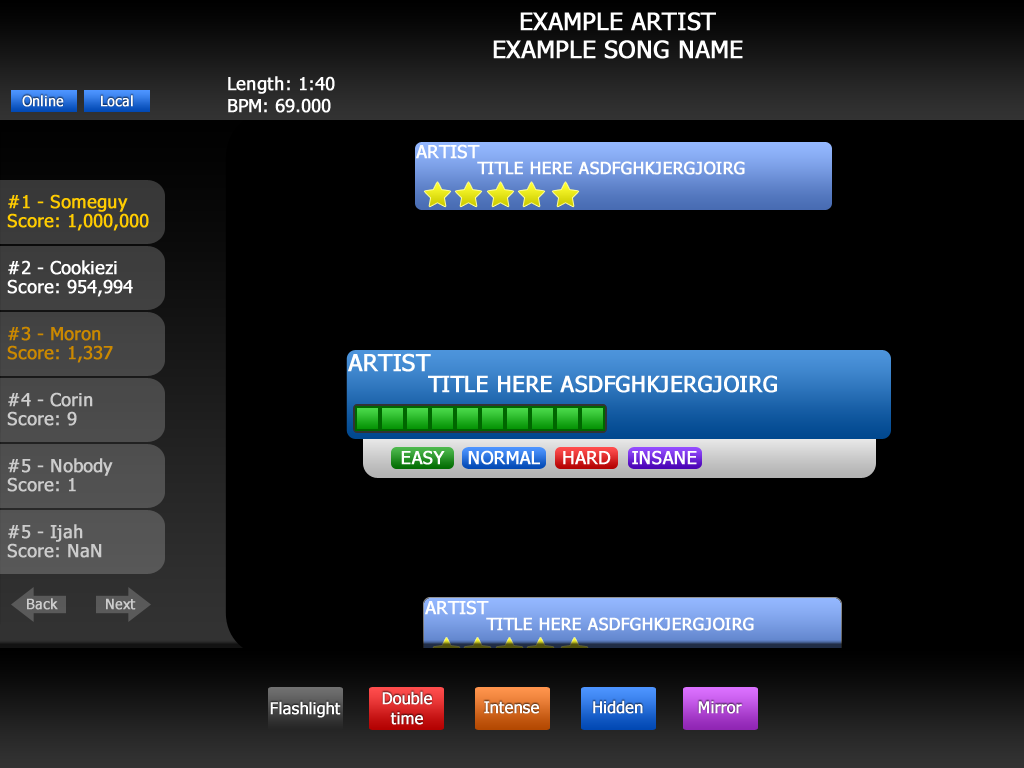
<style>
.page{position:relative;width:1024px;height:768px;background:#000000}
.page>*{position:absolute;margin:0}
.t1{font:24px "Tahoma";color:#ffffff;font-weight:bold}
.t2{font:18px "Tahoma";color:#ffffff;font-weight:bold}
.t3{font:14px "Tahoma";color:#ffffff;font-weight:bold}
.t4{font:17px "Tahoma";color:#ffffff;font-weight:bold}
.t5{font:18px "Tahoma";color:#ffcc00;font-weight:bold}
.t6{font:18px "Tahoma";color:#ca8800;font-weight:bold}
.t7{font:23.6px "Tahoma";color:#ffffff;font-weight:bold}
.t8{font:22.2px "Tahoma";color:#ffffff;font-weight:bold}
.t9{font:18px "Tahoma";color:#cccccc;font-weight:bold}
.t10{font:14px "Tahoma";color:#cccccc;font-weight:bold}
.t11{font:16px "Tahoma";color:#ffffff;font-weight:bold}
.t12{font:16px/19.2px "Tahoma";color:#ffffff;font-weight:bold}
</style>
<div class="page">
<p class="t1" style="left:520px;top:12px;width:196px;height:19px">EXAMPLE ARTIST</p>
<p class="t1" style="left:493px;top:40px;width:250px;height:19px">EXAMPLE SONG NAME</p>
<p class="t2" style="left:228px;top:76px;width:107px;height:18px">Length: 1:40</p>
<p class="t3" style="left:22px;top:95px;width:42px;height:12px">Online</p>
<p class="t3" style="left:101px;top:95px;width:32px;height:12px">Local</p>
<p class="t2" style="left:228px;top:98px;width:103px;height:15px">BPM: 69.000</p>
<p class="t2" style="left:416px;top:144px;width:64px;height:15px">ARTIST</p>
<p class="t4" style="left:477px;top:161px;width:268px;height:14px">TITLE HERE ASDFGHKJERGJOIRG</p>
<p class="t5" style="left:8px;top:194px;width:120px;height:18px">#1 - Someguy</p>
<p class="t5" style="left:7px;top:213px;width:142px;height:18px">Score: 1,000,000</p>
<p class="t2" style="left:8px;top:260px;width:109px;height:15px">#2 - Cookiezi</p>
<p class="t2" style="left:7px;top:279px;width:126px;height:18px">Score: 954,994</p>
<p class="t6" style="left:8px;top:326px;width:93px;height:15px">#3 - Moron</p>
<p class="t6" style="left:7px;top:345px;width:106px;height:18px">Score: 1,337</p>
<p class="t7" style="left:348px;top:353px;width:83px;height:19px">ARTIST</p>
<p class="t8" style="left:428px;top:375px;width:349px;height:18px">TITLE HERE ASDFGHKJERGJOIRG</p>
<p class="t9" style="left:8px;top:392px;width:85px;height:15px">#4 - Corin</p>
<p class="t9" style="left:7px;top:411px;width:70px;height:15px">Score: 9</p>
<p class="t9" style="left:8px;top:458px;width:105px;height:18px">#5 - Nobody</p>
<p class="t2" style="left:401px;top:450px;width:44px;height:15px">EASY</p>
<p class="t2" style="left:468px;top:450px;width:72px;height:15px">NORMAL</p>
<p class="t2" style="left:563px;top:451px;width:48px;height:14px">HARD</p>
<p class="t2" style="left:632px;top:450px;width:65px;height:15px">INSANE</p>
<p class="t9" style="left:7px;top:477px;width:69px;height:15px">Score: 1</p>
<p class="t9" style="left:8px;top:524px;width:75px;height:18px">#5 - Ijah</p>
<p class="t9" style="left:7px;top:543px;width:95px;height:15px">Score: NaN</p>
<p class="t10" style="left:27px;top:598px;width:31px;height:12px">Back</p>
<p class="t10" style="left:106px;top:598px;width:30px;height:12px">Next</p>
<p class="t11" style="left:270px;top:701px;width:71px;height:17px">Flashlight</p>
<p class="t12" style="left:382px;top:691px;width:50px;height:34px;text-align:center">Double<br>time</p>
<p class="t11" style="left:484px;top:701px;width:55px;height:13px">Intense</p>
<p class="t11" style="left:593px;top:700px;width:50px;height:14px">Hidden</p>
<p class="t11" style="left:698px;top:701px;width:44px;height:13px">Mirror</p>
</div>
